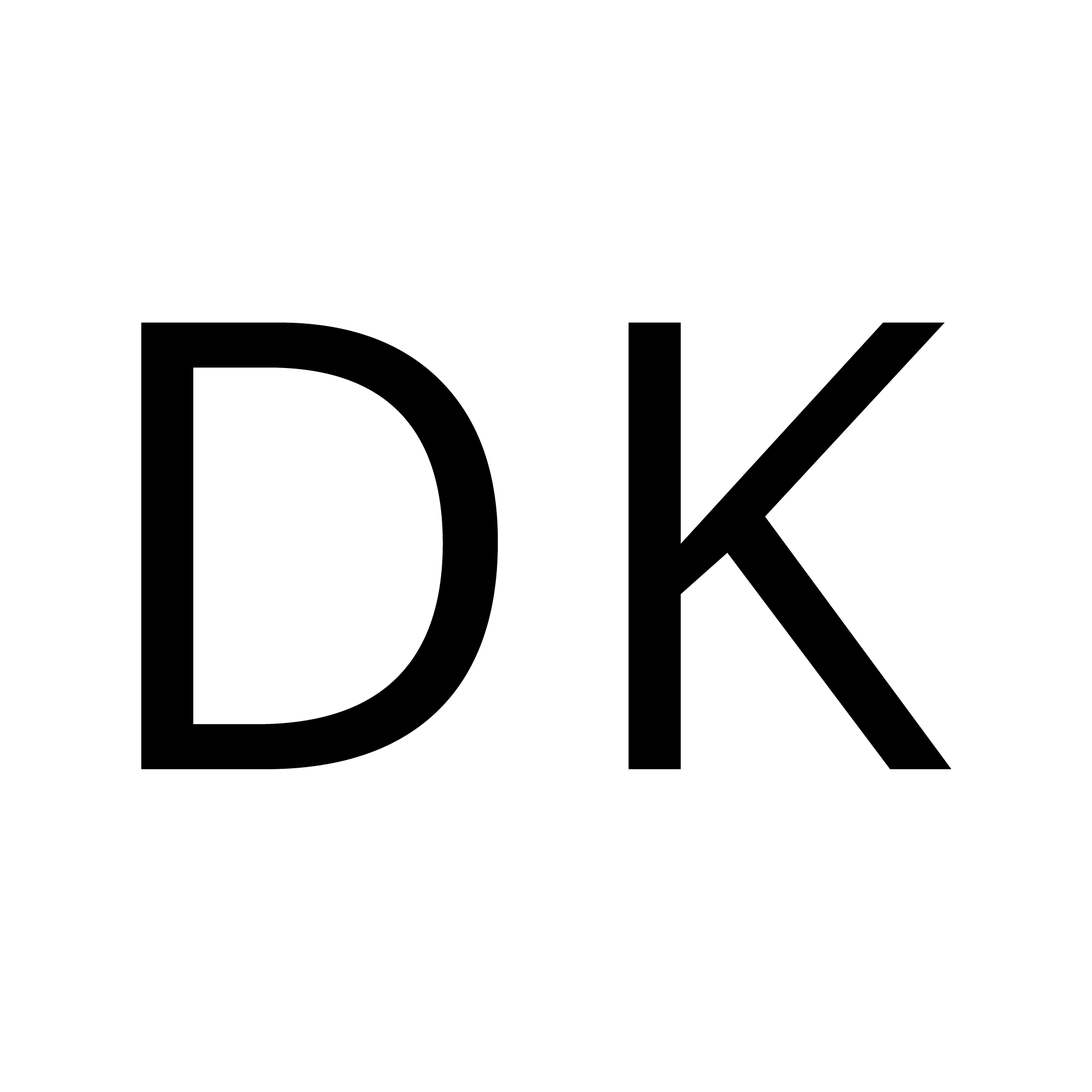
<style>
.page{position:relative;width:1092px;height:1092px;background:#ffffff}
.page>*{position:absolute;margin:0}
.t1{font:625.6px "OpenSans-Regular";letter-spacing:0.05em;color:#000000}
</style>
<div class="page">
<p class="t1" style="left:141px;top:322px;width:811px;height:447px">DK</p>
</div>
